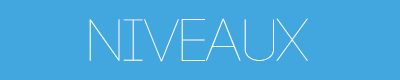
<style>
.page{position:relative;width:400px;height:80px;background:#43a7df}
.page>*{position:absolute;margin:0}
.t1{font:60px "Code-Light";color:#ffffff}
</style>
<div class="page">
<p class="t1" style="left:89px;top:18px;width:219px;height:44px">niveaux</p>
</div>
